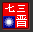
<style>
.page{position:relative;width:33px;height:32px;background:#f20000}
.page>*{position:absolute;margin:0}
.t1{font:10.4px "SimSun";color:#ffffff}
.t2{font:11.7px "SimSun";color:#ffffff}
</style>
<div class="page">
<p class="t1" style="left:5px;top:4px;width:20px;height:8px">七三</p>
<p class="t2" style="left:16px;top:15px;width:11px;height:12px">晋</p>
</div>
